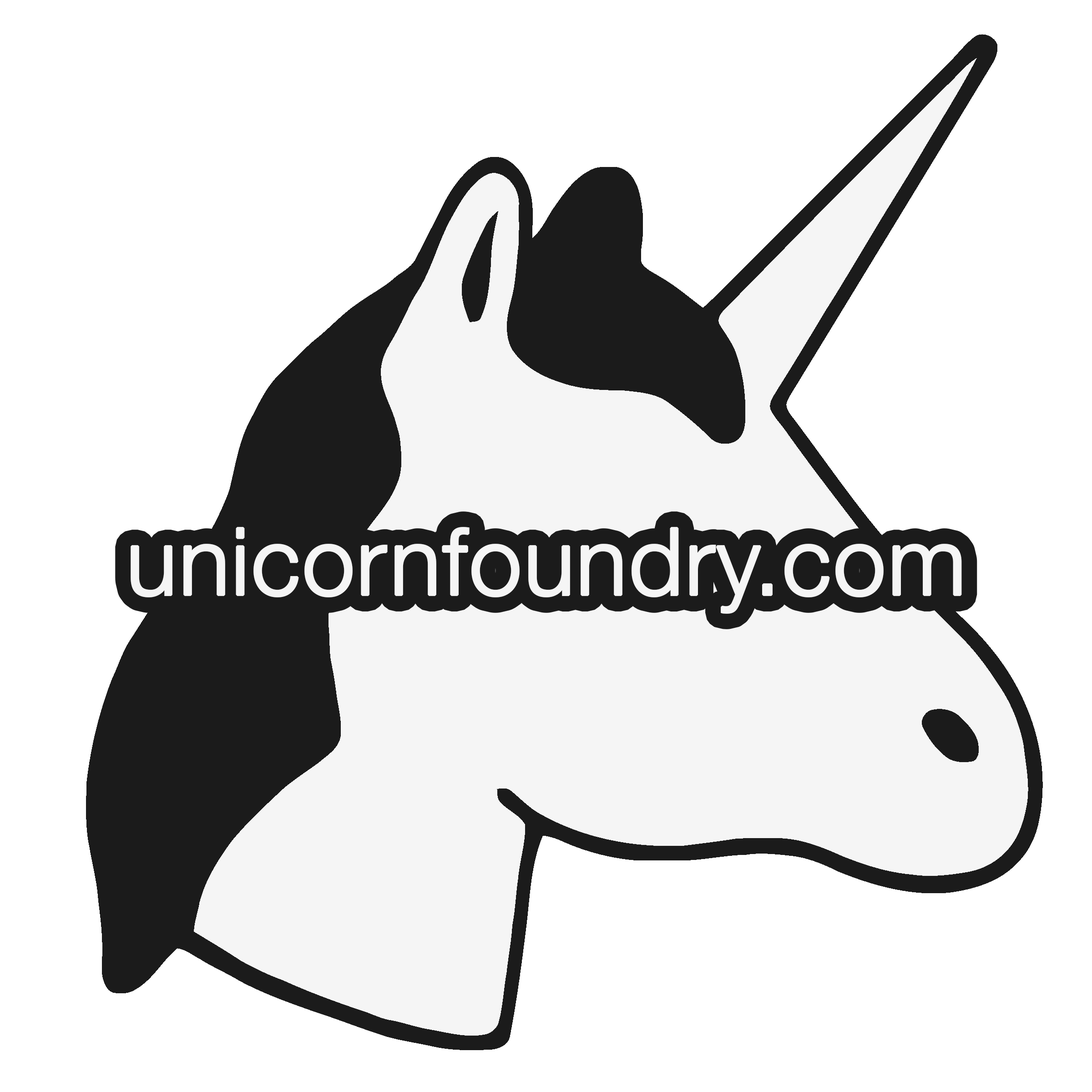
<style>
.page{position:relative;width:1092px;height:1092px;background:#ffffff}
.page>*{position:absolute;margin:0}
.t1{font:93.3px "HelveticaNeue-Light";color:#f5f5f5;font-weight:bold}
</style>
<div class="page">
<p class="t1" style="left:131px;top:527px;width:831px;height:87px">unicornfoundry.com</p>
</div>
